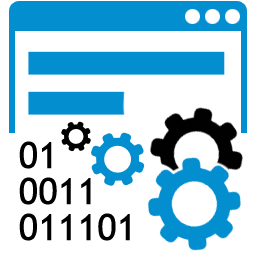
<style>
.page{position:relative;width:256px;height:256px;background:#ffffff}
.page>*{position:absolute;margin:0}
.t1{font:36px/36px "TrebuchetMS";color:#000000;font-weight:bold}
</style>
<div class="page">
<p class="t1" style="left:19px;top:141px;width:111px;height:100px">01<br>0011<br>011101</p>
</div>
